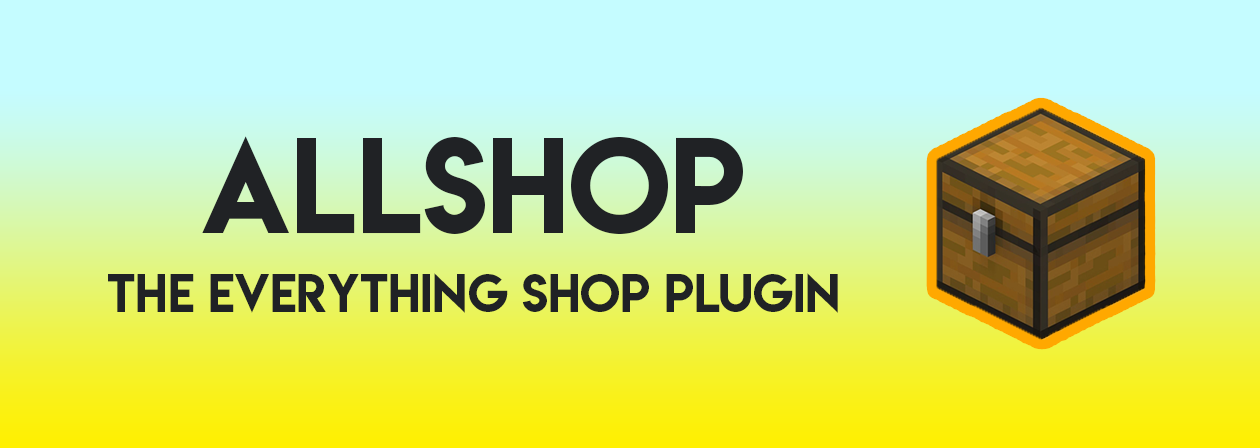
<style>
.page{position:relative;width:1260px;height:448px;background:#c5fcff}
.page>*{position:absolute;margin:0}
.t1{font:120.6px "LemonMilk";color:#202225}
.t2{font:48px "LemonMilk";color:#202225}
</style>
<div class="page">
<p class="t1" style="left:202px;top:136px;width:541px;height:98px">ALLSHOP</p>
<p class="t2" style="left:108px;top:273px;width:730px;height:40px">The everything shop plugin</p>
</div>
